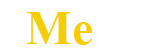
<style>
.page{position:relative;width:155px;height:56px;background:#ffffff}
.page>*{position:absolute;margin:0}
.t1{font:48px "TimesNewRomanPS-BoldMT";color:#f6cc07}
.t2{font:48px "TimesNewRomanPS-BoldMT";color:#ffffff}
</style>
<div class="page">
<p class="t1" style="left:26px;top:12px;width:102px;height:33px">Me<span class="t2">V</span></p>
</div>
